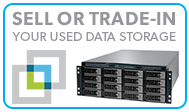
<style>
.page{position:relative;width:189px;height:112px;background:#ffffff}
.page>*{position:absolute;margin:0}
.t1{font:13px "Gibson-Regular";letter-spacing:0.025em;color:#95979a}
.t2{font:19px "Gibson-SemiBold";letter-spacing:0.025em;color:#95979a}
</style>
<div class="page">
<p class="t1" style="left:12px;top:11px;width:164px;height:30px"><span class="t2">SELL OR TRADE-IN</span> <br>YOUR USED DATA STORAGE</p>
</div>
